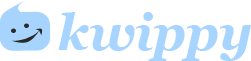
<style>
.page{position:relative;width:251px;height:61px;background:#ffffff}
.page>*{position:absolute;margin:0}
.t1{font:49.7px "Georgia-BoldItalic";color:#a7d4ff}
</style>
<div class="page">
<p class="t1" style="left:58px;top:12px;width:193px;height:49px">kwippy</p>
</div>
